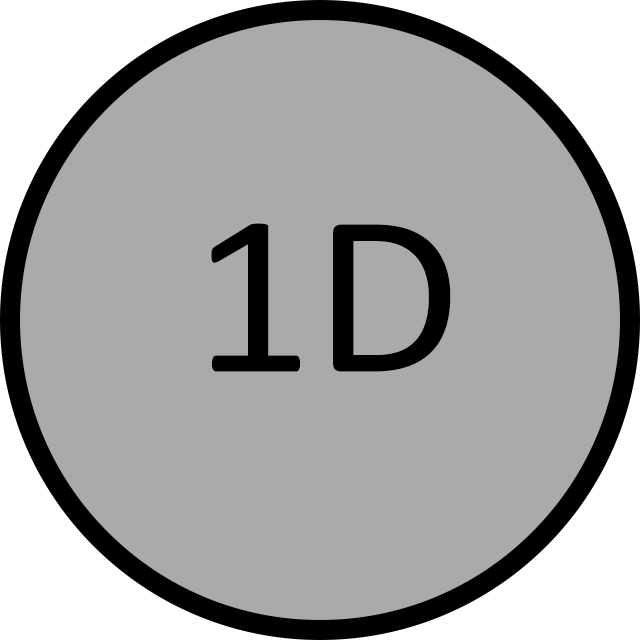
<style>
.page{position:relative;width:640px;height:640px;background:#aaaaaa}
.page>*{position:absolute;margin:0}
.t1{font:232.2px "Calibri";color:#000000;scale:1.04 1}
</style>
<div class="page">
<p class="t1" style="left:211px;top:223px;width:240px;height:149px">1D</p>
</div>
